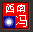
<style>
.page{position:relative;width:33px;height:32px;background:#f20000}
.page>*{position:absolute;margin:0}
.t1{font:10.4px "SimSun";color:#ffffff}
.t2{font:11.7px "SimSun";color:#ffffff}
</style>
<div class="page">
<p class="t1" style="left:6px;top:4px;width:19px;height:9px">西南</p>
<p class="t2" style="left:16px;top:15px;width:11px;height:12px">冯</p>
</div>
